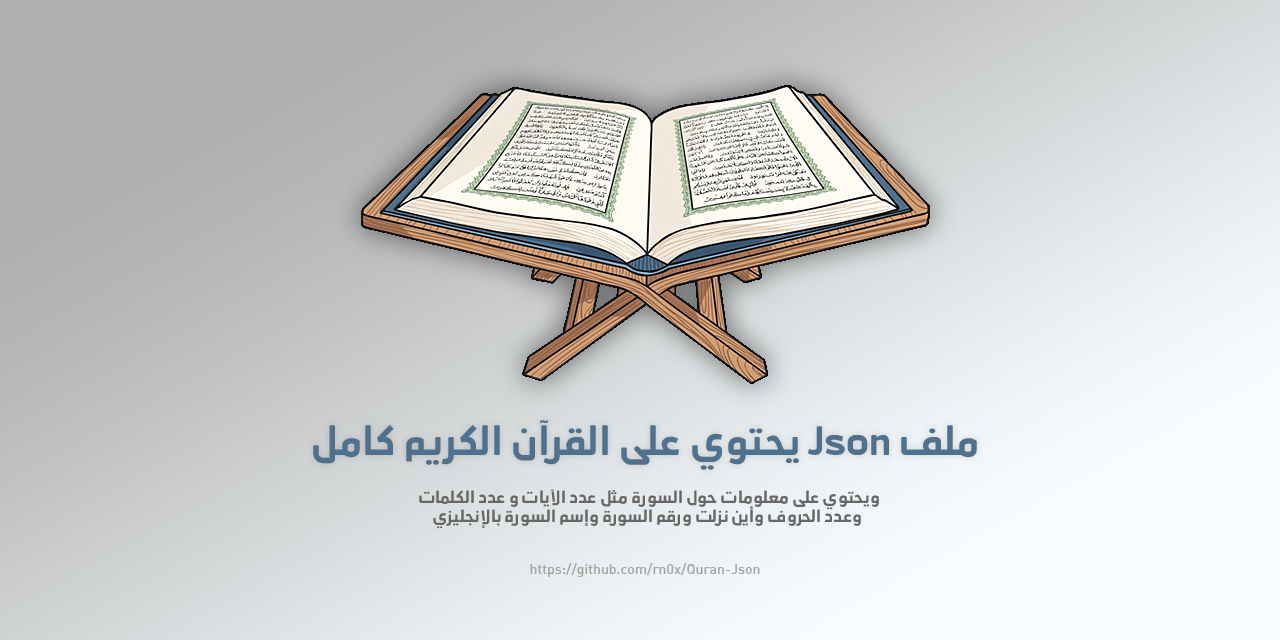
<style>
.page{position:relative;width:1280px;height:640px}
.page>*{position:absolute;margin:0}
.t1{font:38px "AbdoMaster-SemiBold";color:#4f718d}
.t2{font:16px "AbdoMaster-SemiBold";color:#676767}
.t3{font:14px "Alameen-Demibold";color:#a5a5a5}
</style>
<div class="page">
<p class="t1" style="left:313px;top:420px;width:664px;height:50px">ملف Json يحتوي على القرآن الكريم كامل</p>
<p class="t2" style="left:419px;top:489px;width:460px;height:40px;text-align:center">ويحتوي على معلومات حول السورة مثل عدد الآيات و عدد الكلمات<br> وعدد الحروف وأين نزلت ورقم السورة وإسم السورة بالإنجليزي</p>
<p class="t3" style="left:530px;top:563px;width:230px;height:14px">https://github.com/rn0x/Quran-Json</p>
</div>
